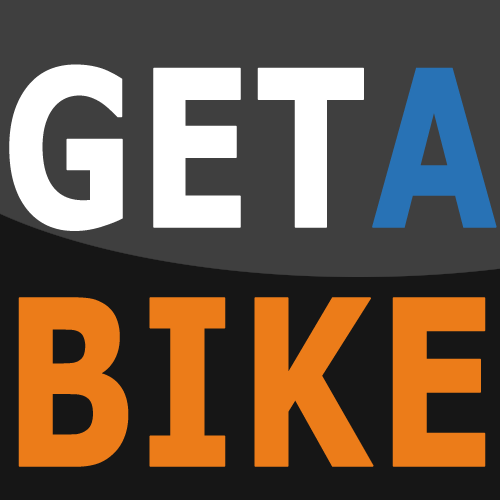
<style>
.page{position:relative;width:500px;height:500px;background:#3f3f3f}
.page>*{position:absolute;margin:0}
.t1{font:218.1px "Verdana-Bold";color:#ffffff;font-weight:bold;scale:0.75 1}
.t2{font:218.1px "Verdana-Bold";color:#2872b5;font-weight:bold;scale:0.75 1}
.t3{font:230.9px "Verdana-Bold";color:#ec7c19;font-weight:bold;scale:0.75 1}
</style>
<div class="page">
<p class="t1" style="left:9px;top:64px;width:488px;height:167px">GET<span class="t2">A</span></p>
<p class="t3" style="left:18px;top:297px;width:468px;height:170px">BIKE</p>
</div>
